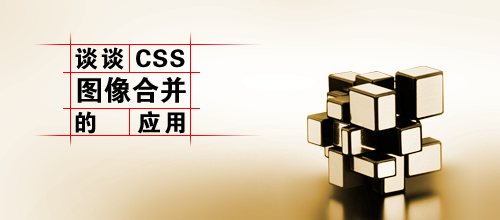
<style>
.page{position:relative;width:500px;height:220px}
.page>*{position:absolute;margin:0}
.t1{font:24px "FZDHTJW--GB1-0";letter-spacing:0.1em;color:#000000}
.t2{font:24px "FZDHTJW--GB1-0";letter-spacing:0.05em;color:#000000}
.t3{font:28px "FZDHTJW--GB1-0";color:#000000}
</style>
<div class="page">
<p class="t1" style="left:75px;top:47px;width:49px;height:23px">谈谈</p>
<p class="t2" style="left:136px;top:49px;width:49px;height:19px">CSS</p>
<p class="t3" style="left:77px;top:77px;width:109px;height:27px">图像合并</p>
<p class="t1" style="left:75px;top:111px;width:21px;height:23px">的</p>
<p class="t1" style="left:137px;top:111px;width:48px;height:23px">应用</p>
</div>
